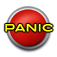
<style>
.page{position:relative;width:57px;height:57px;background:#ffffff}
.page>*{position:absolute;margin:0}
.t1{font:9px "BlairMdITCTTMedium";color:#fffc00;font-weight:bold;scale:1.22 1}
</style>
<div class="page">
<p class="t1" style="left:5px;top:24px;width:48px;height:8px">PANIC</p>
</div>
